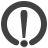
<style>
.page{position:relative;width:48px;height:48px;background:#ffffff}
.page>*{position:absolute;margin:0}
.t1{font:50px "TimesNewRomanPSMT";color:#414141;font-weight:bold}
</style>
<div class="page">
<p class="t1" style="left:20px;top:10px;width:8px;height:36px">!</p>
</div>
